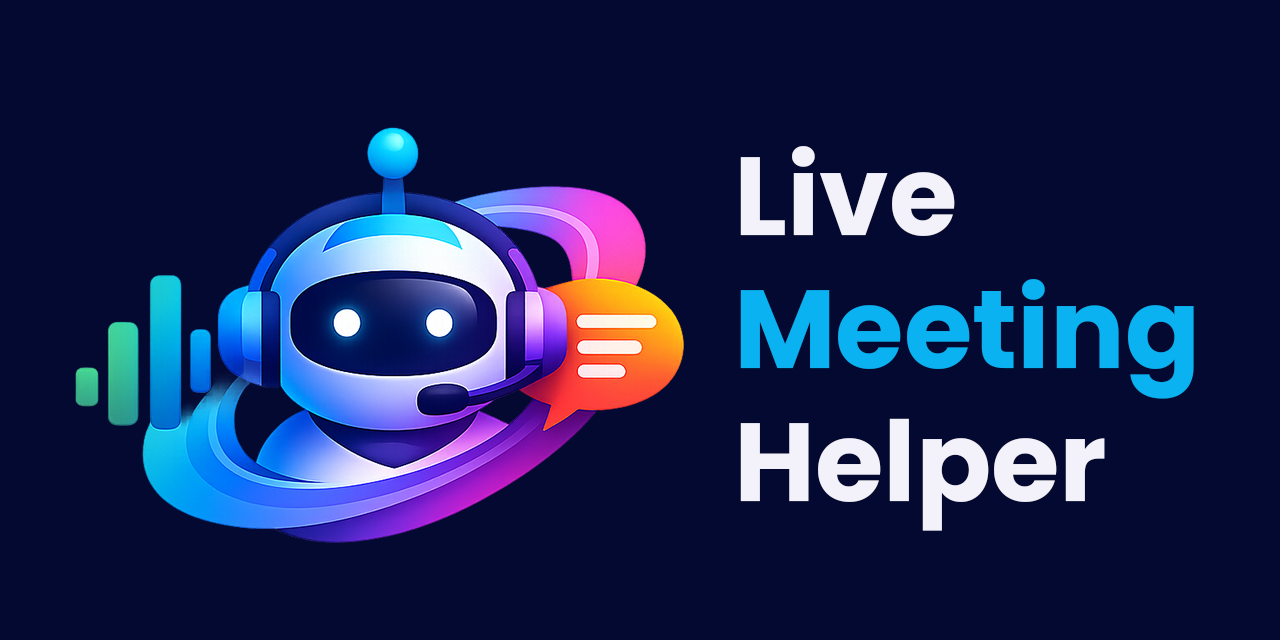
<style>
.page{position:relative;width:1280px;height:640px;background:#040932}
.page>*{position:absolute;margin:0}
.t1{font:110.9px "Poppins-Bold";color:#0bb2f2}
.t2{font:110.9px "Poppins-Bold";color:#f3f1fa}
</style>
<div class="page">
<p class="t1" style="left:740px;top:146px;width:454px;height:385px"><span class="t2">Live<br></span>Meeting<br><span class="t2">Helper</span></p>
</div>
